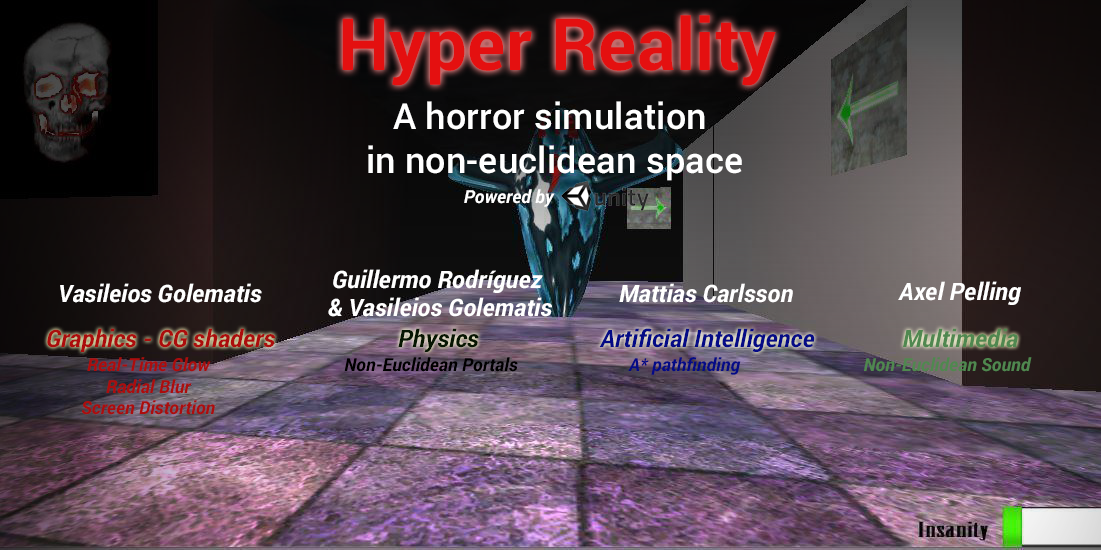
<style>
.page{position:relative;width:1101px;height:550px}
.page>*{position:absolute;margin:0}
.t1{font:72px "Roboto-Bold";letter-spacing:0.005em;color:#e41010}
.t2{font:36px "Roboto-Medium";letter-spacing:0.005em;color:#ffffff}
.t3{font:18px "Roboto-BoldItalic";letter-spacing:0.005em;color:#ffffff}
.t4{font:24px "Roboto-BoldItalic";letter-spacing:0.005em;color:#ffffff}
.t5{font:24px "Roboto-BoldItalic";letter-spacing:0.005em;color:#ac0d0d}
.t6{font:24px "Roboto-BoldItalic";letter-spacing:0.005em;color:#071602}
.t7{font:24px "Roboto-BoldItalic";letter-spacing:0.005em;color:#050b86}
.t8{font:24px "Roboto-BoldItalic";letter-spacing:0.005em;color:#4f884f}
.t9{font:18px "Roboto-BoldItalic";letter-spacing:0.005em;color:#ac0d0d}
.t10{font:18px "Roboto-BoldItalic";letter-spacing:0.005em;color:#000000}
.t11{font:18px "Roboto-BoldItalic";letter-spacing:0.005em;color:#050b86}
.t12{font:18px "Roboto-BoldItalic";letter-spacing:0.005em;color:#4f884f}
</style>
<div class="page">
<p class="t1" style="left:342px;top:15px;width:434px;height:71px">Hyper Reality</p>
<p class="t2" style="left:368px;top:101px;width:374px;height:80px;text-align:center">A horror simulation <br>in non-euclidean space</p>
<p class="t3" style="left:464px;top:189px;width:91px;height:18px">Powered by</p>
<p class="t4" style="left:328px;top:269px;width:224px;height:48px;text-align:center">Guillermo Rodríguez <br>&amp; Vasileios Golematis</p>
<p class="t4" style="left:898px;top:281px;width:123px;height:24px">Axel Pelling</p>
<p class="t4" style="left:60px;top:283px;width:202px;height:20px">Vasileios Golematis</p>
<p class="t4" style="left:619px;top:283px;width:174px;height:20px">Mattias Carlsson</p>
<p class="t5" style="left:47px;top:328px;width:228px;height:24px">Graphics - CG shaders</p>
<p class="t6" style="left:398px;top:328px;width:81px;height:24px">Physics</p>
<p class="t7" style="left:599px;top:328px;width:216px;height:24px">Artificial Intelligence</p>
<p class="t8" style="left:903px;top:328px;width:115px;height:20px">Multimedia</p>
<p class="t9" style="left:82px;top:357px;width:133px;height:58px;text-align:center">Real-Time Glow<br>Radial Blur<br>Screen Distortion</p>
<p class="t10" style="left:344px;top:357px;width:174px;height:15px">Non-Euclidean Portals</p>
<p class="t11" style="left:628px;top:357px;width:113px;height:18px">A* pathfinding</p>
<p class="t12" style="left:864px;top:357px;width:168px;height:15px">Non-Euclidean Sound</p>
</div>
